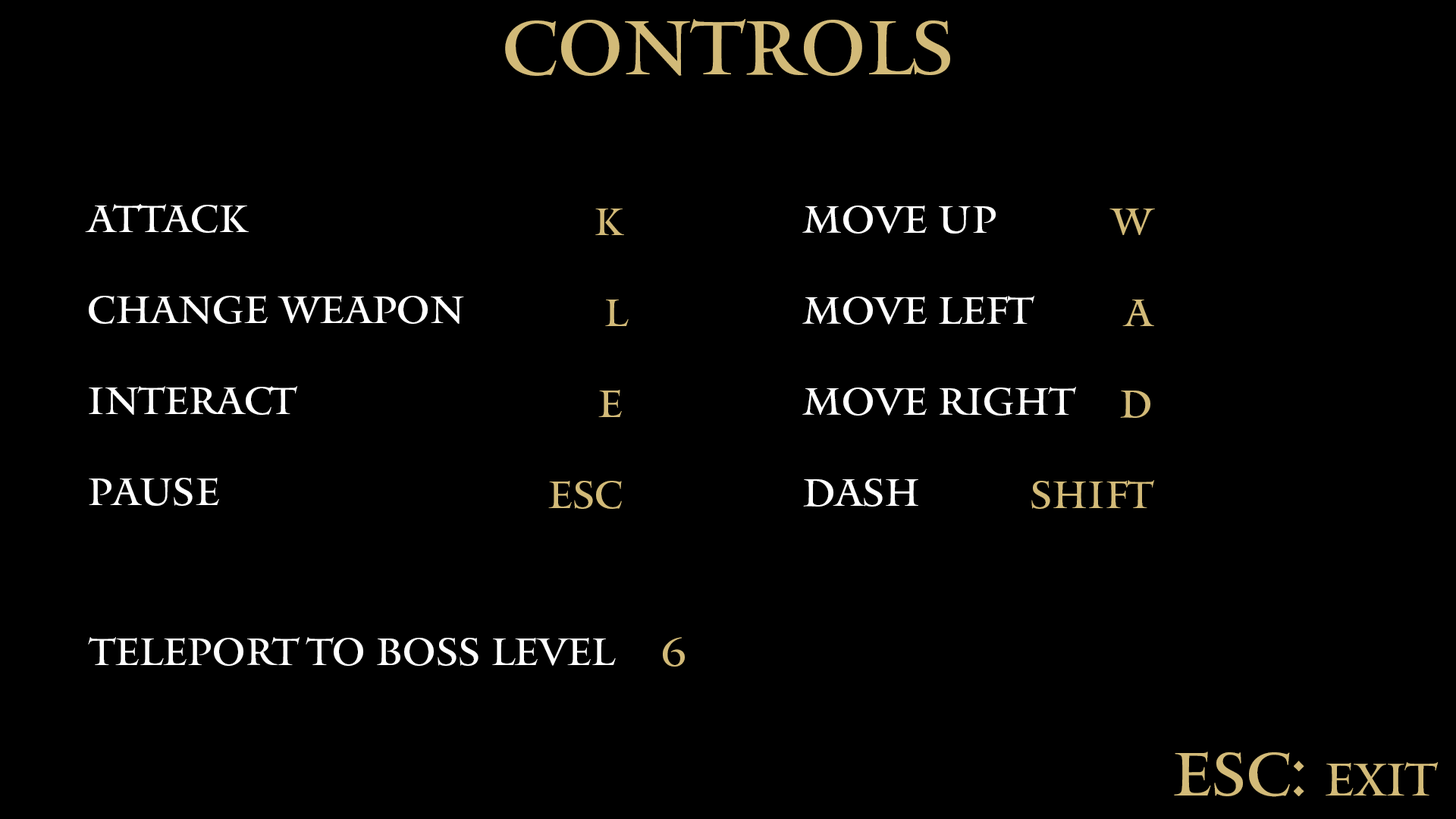
<style>
.page{position:relative;width:1456px;height:819px;background:#000000}
.page>*{position:absolute;margin:0}
.t1{font:75.8px "Mantinia";color:#d2ba78}
.t2{font:37.9px "Mantinia";color:#ffffff}
.t3{font:37.9px "Mantinia";color:#d2ba78}
.t4{font:37.9px "Mantinia";color:#fefefe}
.t5{font:60.7px "Mantinia";color:#d2ba78}
.t6{font:45.5px "Mantinia";color:#d2ba78}
</style>
<div class="page">
<p class="t1" style="left:505px;top:19px;width:445px;height:57px">CONTROLS</p>
<p class="t2" style="left:85px;top:204px;width:379px;height:302px">ATTACK<br><br>CHANGE WEAPON<br><br>INTERACT<br><br>PAUSE</p>
<p class="t3" style="left:548px;top:209px;width:81px;height:300px;text-align:right">K<br><br>L<br><br>E<br><br>ESC</p>
<p class="t2" style="left:802px;top:206px;width:274px;height:301px">MOVE UP<br><br>MOVE LEFT<br><br>MOVE RIGHT<br><br>DASH</p>
<p class="t3" style="left:1031px;top:209px;width:124px;height:300px;text-align:right">W<br><br>A<br><br>D<br><br>SHIFT</p>
<p class="t4" style="left:88px;top:637px;width:528px;height:29px">TELEPORT TO BOSS LEVEL</p>
<p class="t3" style="left:663px;top:637px;width:22px;height:30px">6</p>
<p class="t5" style="left:1174px;top:751px;width:265px;height:46px">ESC: <span class="t6">EXIT</span></p>
</div>
